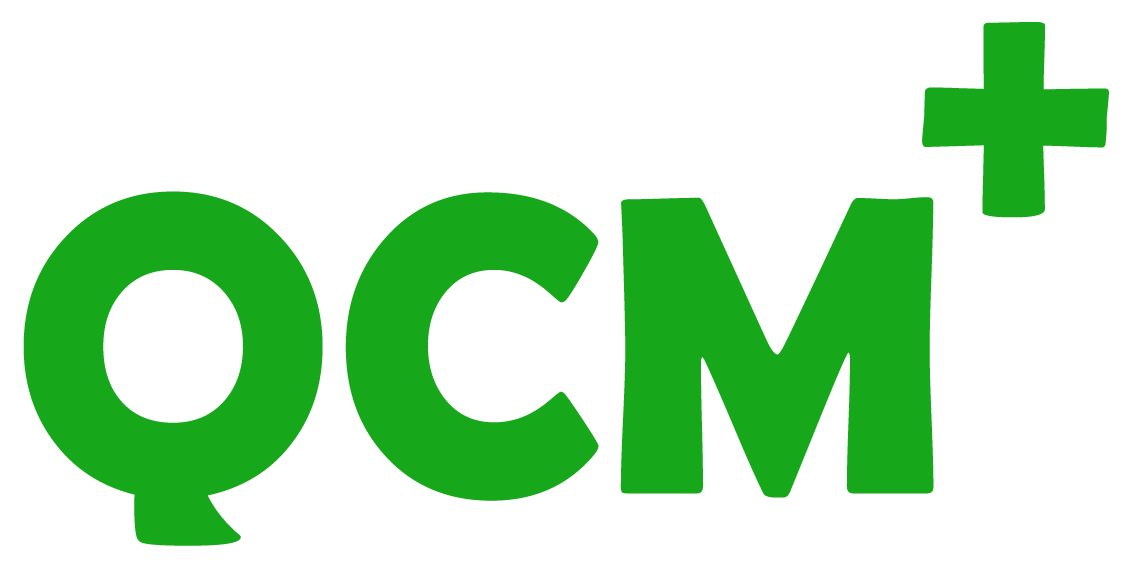
<style>
.page{position:relative;width:1125px;height:569px;background:#ffffff}
.page>*{position:absolute;margin:0}
.t1{font:429px "BerlinSansFBDemi-Bold";color:#17a71a}
</style>
<div class="page">
<p class="t1" style="left:922px;top:22px;width:187px;height:196px">+</p>
<p class="t1" style="left:23px;top:191px;width:911px;height:355px">QCM</p>
</div>
